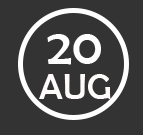
<style>
.page{position:relative;width:143px;height:135px;background:#333333}
.page>*{position:absolute;margin:0}
.t1{font:51.2px "BerlinSansFB-Reg";color:#fffefe}
.t2{font:36.1px "BerlinSansFB-Reg";color:#fffbfb}
</style>
<div class="page">
<p class="t1" style="left:47px;top:34px;width:54px;height:31px">20</p>
<p class="t2" style="left:39px;top:74px;width:72px;height:25px">AUG</p>
</div>
